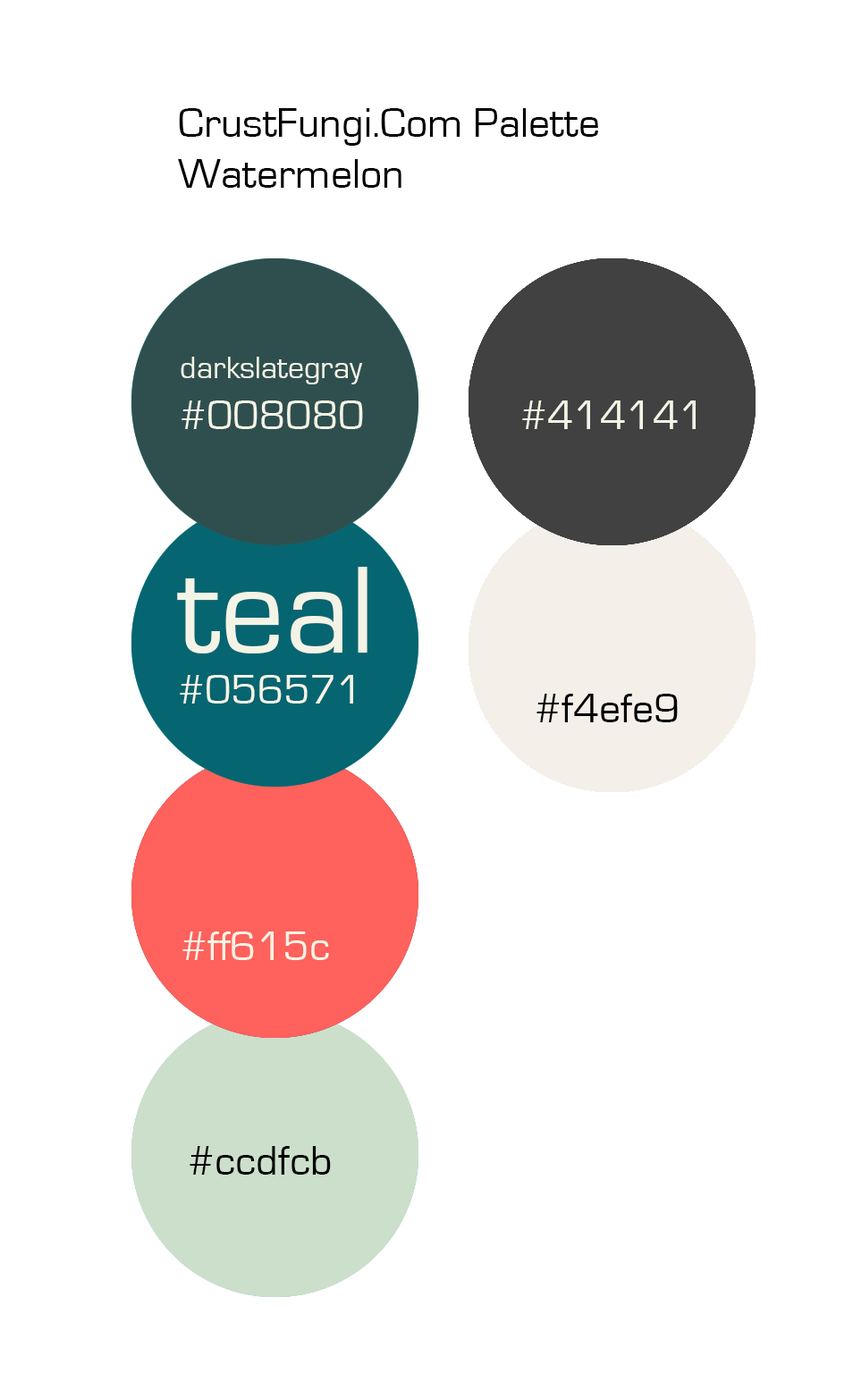
<style>
.page{position:relative;width:853px;height:1399px;background:#ffffff}
.page>*{position:absolute;margin:0}
.t1{font:42.9px "EurostileRegular";color:#000000}
.t2{font:32.2px "EurostileRegular";color:#f4f4e6}
.t3{font:42.9px "EurostileRegular";color:#f4f4e6}
.t4{font:128.7px "EurostileRegular";color:#f4f4e6}
.t5{font:128.7px "EurostileRegular";color:#000000}
</style>
<div class="page">
<p class="t1" style="left:178px;top:108px;width:420px;height:80px">CrustFungi.Com Palette<br>Watermelon</p>
<p class="t2" style="left:181px;top:357px;width:182px;height:72px">darkslategray<br><span class="t3">#008080</span></p>
<p class="t3" style="left:522px;top:400px;width:173px;height:29px"><span class="t2"><br></span>#414141</p>
<p class="t3" style="left:177px;top:567px;width:190px;height:136px"><span class="t4">teal<br></span>#056571</p>
<p class="t1" style="left:536px;top:694px;width:141px;height:28px"><span class="t5"><br></span>#f4efe9</p>
<p class="t3" style="left:182px;top:931px;width:147px;height:29px"><span class="t4"><br></span>#ff615c</p>
<p class="t1" style="left:189px;top:1146px;width:142px;height:28px"><span class="t2"><br></span>#ccdfcb</p>
</div>
